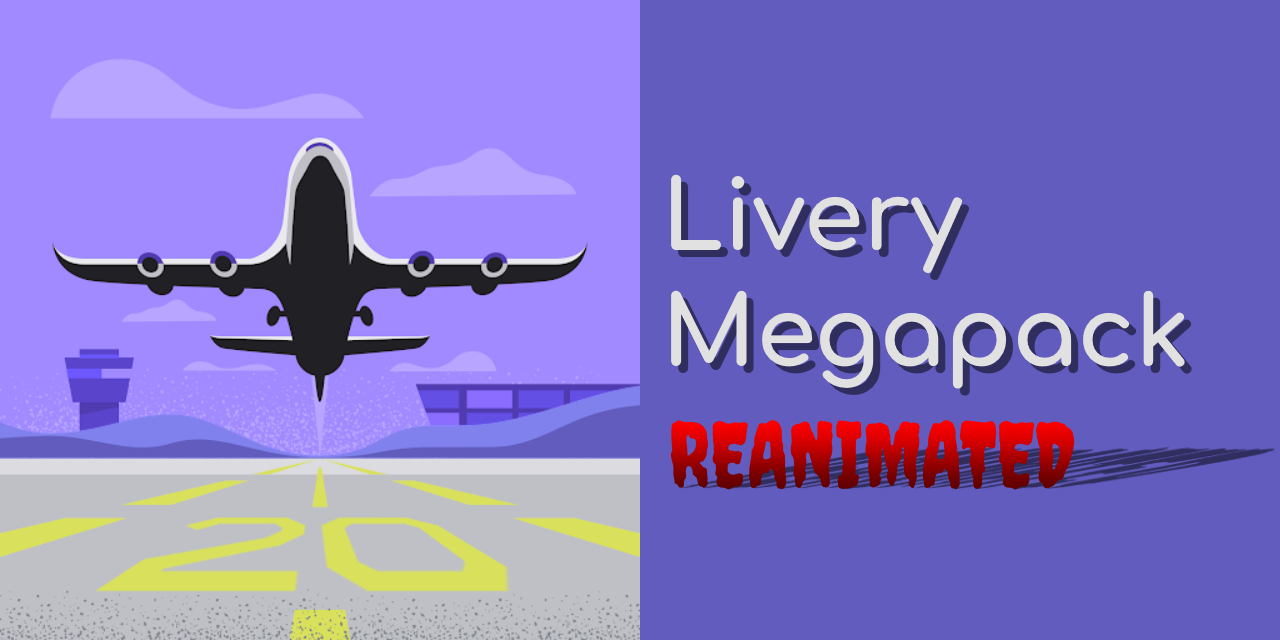
<style>
.page{position:relative;width:1280px;height:640px;background:#615cbd}
.page>*{position:absolute;margin:0}
.t1{font:96.4px "Comfortaa-Bold";color:#e1e1e1}
.t2{font:90.2px "Creepster-Regular"}
</style>
<div class="page">
<p class="t1" style="left:671px;top:174px;width:514px;height:215px">Livery<br>Megapack</p>
<p class="t2" style="left:670px;top:420px;width:405px;height:70px">REANIMATED</p>
</div>
